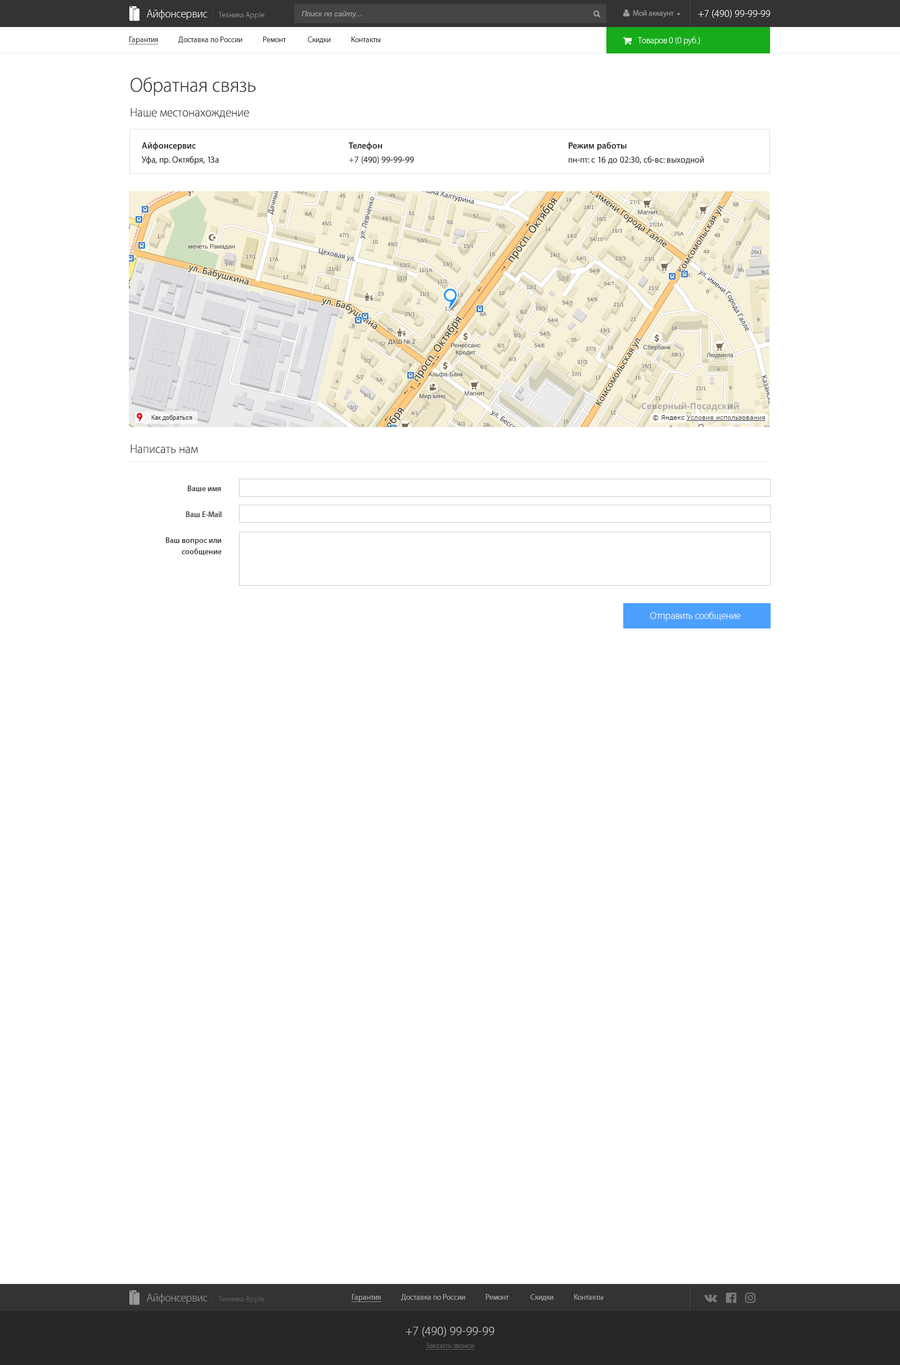
<style>
.page{position:relative;width:900px;height:1365px;background:#ffffff}
.page>*{position:absolute;margin:0}
.t1{font:7.3px "Arial-ItalicMT";color:#999999}
.t2{font:2.7px "ArialMT";color:#999999;scale:1.79 1}
.t3{font:10.1px "MyriadSetPro-Thin";color:#ffffff}
.t4{font:7.9px "MyriadSetPro-Text";color:#333333}
.t5{font:7.9px "MyriadSetPro-Text";color:#333333;text-decoration:underline}
.t6{font:9px "MyriadSetPro-Thin";color:#ffffff}
.t7{font:20.2px "MyriadSetPro-Thin";color:#333333}
.t8{font:12.4px "MyriadSetPro-Thin";color:#333333}
.t9{font:9px "MyriadSetPro-Semibold";color:#333333}
.t10{font:9px "MyriadSetPro-Text";color:#333333}
.t11{font:7.9px "MyriadSetPro-Semibold";color:#333333}
.t12{font:7.9px/11.2px "MyriadSetPro-Semibold";color:#333333}
.t13{font:7.9px "MyriadSetPro-Text";color:#a4a4a4}
.t14{font:7.9px "MyriadSetPro-Text";color:#a4a4a4;text-decoration:underline}
.t15{font:12.4px "MyriadSetPro-Thin";color:#c8c8c8}
.t16{font:7.9px "MyriadSetPro-Thin";color:#666666;text-decoration:underline}
</style>
<div class="page">
<p class="t1" style="left:302px;top:11px;width:60px;height:7px">Поиск по сайту...</p>
<p class="t2" style="left:677px;top:13px;width:4px;height:2px">▼</p>
<p class="t3" style="left:698px;top:10px;width:73px;height:8px">+7 (490) 99-99-99</p>
<p class="t4" style="left:129px;top:37px;width:251px;height:7px"><span class="t5">Гарантия</span>            Доставка по России            Ремонт             Скидки            Контакты</p>
<p class="t6" style="left:637px;top:37px;width:63px;height:9px">Товаров 0 (0 руб.)</p>
<p class="t7" style="left:130px;top:77px;width:126px;height:19px">Обратная связь</p>
<p class="t8" style="left:130px;top:108px;width:119px;height:11px">Наше местонахождение</p>
<p class="t9" style="left:142px;top:142px;width:54px;height:9px">Айфонсервис</p>
<p class="t9" style="left:349px;top:142px;width:33px;height:9px">Телефон</p>
<p class="t9" style="left:569px;top:142px;width:58px;height:9px">Режим работы</p>
<p class="t10" style="left:142px;top:156px;width:77px;height:9px">Уфа, пр. Октября, 13а</p>
<p class="t10" style="left:349px;top:156px;width:65px;height:8px">+7 (490) 99-99-99</p>
<p class="t10" style="left:569px;top:156px;width:135px;height:8px">пн-пт: с 16 до 02:30, сб-вс: выходной</p>
<p class="t8" style="left:130px;top:444px;width:68px;height:9px">Написать нам</p>
<p class="t11" style="left:187px;top:485px;width:34px;height:6px">Ваше имя</p>
<p class="t11" style="left:186px;top:511px;width:36px;height:6px">Ваш E-Mail</p>
<p class="t12" style="left:165px;top:537px;width:57px;height:18px;text-align:right">Ваш вопрос или<br>сообщение</p>
<p class="t3" style="left:650px;top:611px;width:91px;height:10px">Отправить сообщение</p>
<p class="t13" style="left:352px;top:1294px;width:251px;height:8px"><span class="t14">Гарантия</span>            Доставка по России            Ремонт             Скидки            Контакты</p>
<p class="t15" style="left:406px;top:1326px;width:88px;height:10px">+7 (490) 99-99-99</p>
<p class="t16" style="left:425px;top:1342px;width:50px;height:7px">Заказать звонок</p>
</div>
